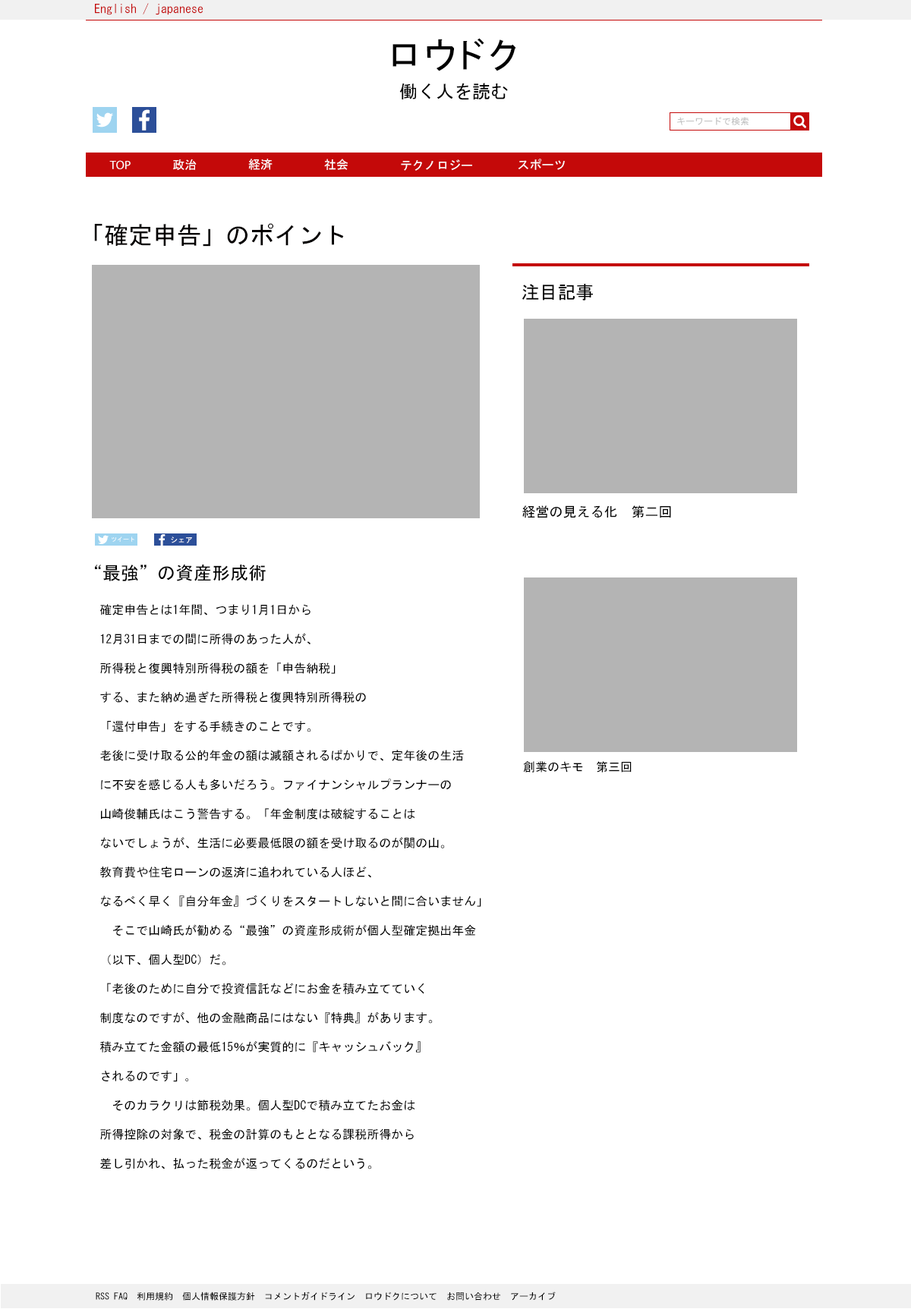
<style>
.page{position:relative;width:911px;height:1309px;background:#ffffff}
.page>*{position:absolute;margin:0}
.t1{font:12.1px "MS-Gothic";color:#c40909}
.t2{font:36.4px "MS-Gothic";color:#000000}
.t3{font:18.2px "MS-Gothic";color:#000000}
.t4{font:9.1px "MS-Gothic";color:#bfbfbf}
.t5{font:12.1px "MyriadPro-Regular";color:#ffffff}
.t6{font:12.1px "MS-Gothic";color:#ffffff}
.t7{font:24.3px "MS-Gothic";color:#030000}
.t8{font:13.7px "MS-Gothic";color:#000000}
.t9{font:6.1px "MS-Gothic";color:#ffffff}
.t10{font:7.6px "MS-Gothic";color:#ffffff}
.t11{font:12.1px "MS-Gothic";color:#000000}
.t12{font:9.1px "MS-Gothic";color:#000000}
</style>
<div class="page">
<p class="t1" style="left:95px;top:3px;width:108px;height:12px">English / japanese</p>
<p class="t2" style="left:392px;top:38px;width:124px;height:33px">ロウドク</p>
<p class="t3" style="left:399px;top:83px;width:109px;height:17px">働く人を読む</p>
<p class="t4" style="left:677px;top:117px;width:71px;height:8px">キーワードで検索</p>
<p class="t5" style="left:109px;top:160px;width:22px;height:9px">TOP</p>
<p class="t6" style="left:173px;top:159px;width:24px;height:11px">政治</p>
<p class="t6" style="left:248px;top:159px;width:24px;height:11px">経済</p>
<p class="t6" style="left:324px;top:159px;width:24px;height:11px">社会</p>
<p class="t6" style="left:401px;top:159px;width:71px;height:12px">テクノロジー</p>
<p class="t6" style="left:518px;top:159px;width:47px;height:11px">スポーツ</p>
<p class="t7" style="left:94px;top:223px;width:250px;height:24px">「確定申告」のポイント</p>
<p class="t3" style="left:521px;top:284px;width:72px;height:17px">注目記事</p>
<p class="t8" style="left:522px;top:505px;width:149px;height:13px">経営の見える化　第二回</p>
<p class="t9" style="left:112px;top:537px;width:22px;height:5px">ツイート</p>
<p class="t10" style="left:171px;top:537px;width:21px;height:6px">シェア</p>
<p class="t3" style="left:95px;top:564px;width:171px;height:17px">“最強”の資産形成術</p>
<p class="t11" style="left:99px;top:604px;width:382px;height:566px">確定申告とは1年間、つまり1月1日から<br><br>12月31日までの間に所得のあった人が、<br><br>所得税と復興特別所得税の額を「申告納税」<br><br>する、また納め過ぎた所得税と復興特別所得税の<br><br>「還付申告」をする手続きのことです。<br><br>老後に受け取る公的年金の額は減額されるばかりで、定年後の生活<br><br>に不安を感じる人も多いだろう。ファイナンシャルプランナーの<br><br>山崎俊輔氏はこう警告する。「年金制度は破綻することは<br><br>ないでしょうが、生活に必要最低限の額を受け取るのが関の山。<br><br>教育費や住宅ローンの返済に追われている人ほど、<br><br>なるべく早く『自分年金』づくりをスタートしないと間に合いません」<br><br>　そこで山崎氏が勧める“最強”の資産形成術が個人型確定拠出年金<br><br>（以下、個人型DC）だ。<br><br>「老後のために自分で投資信託などにお金を積み立てていく<br><br>制度なのですが、他の金融商品にはない『特典』があります。<br><br>積み立てた金額の最低15％が実質的に『キャッシュバック』<br><br>されるのです」｡<br><br>　そのカラクリは節税効果。個人型DCで積み立てたお金は<br><br>所得控除の対象で、税金の計算のもととなる課税所得から<br><br>差し引かれ、払った税金が返ってくるのだという。</p>
<p class="t11" style="left:523px;top:761px;width:108px;height:12px">創業のキモ　第三回</p>
<p class="t12" style="left:96px;top:1292px;width:460px;height:9px">RSS FAQ  利用規約  個人情報保護方針  コメントガイドライン  ロウドクについて  お問い合わせ  アーカイブ</p>
</div>
